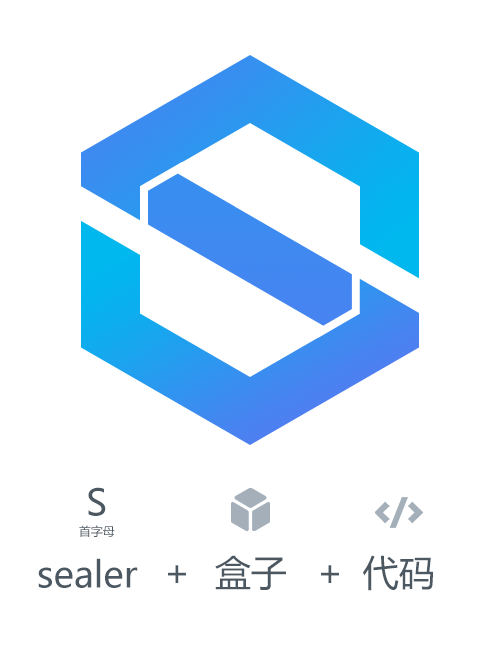
<style>
.page{position:relative;width:500px;height:652px;background:#ffffff}
.page>*{position:absolute;margin:0}
.t1{font:12px/20px "MicrosoftYaHei";color:#4b5761}
.t2{font:36px/20px "MicrosoftYaHei";color:#4b5761}
.t3{font:36px "MicrosoftYaHei";color:#4b5761}
</style>
<div class="page">
<p class="t1" style="left:79px;top:487px;width:36px;height:50px;text-align:center"><span class="t2">S<br></span>首字母</p>
<p class="t3" style="left:38px;top:558px;width:100px;height:30px">sealer</p>
<p class="t3" style="left:215px;top:555px;width:71px;height:35px">盒子</p>
<p class="t3" style="left:363px;top:555px;width:70px;height:36px">代码</p>
<p class="t3" style="left:168px;top:565px;width:18px;height:18px">+</p>
<p class="t3" style="left:321px;top:565px;width:18px;height:18px">+</p>
</div>
